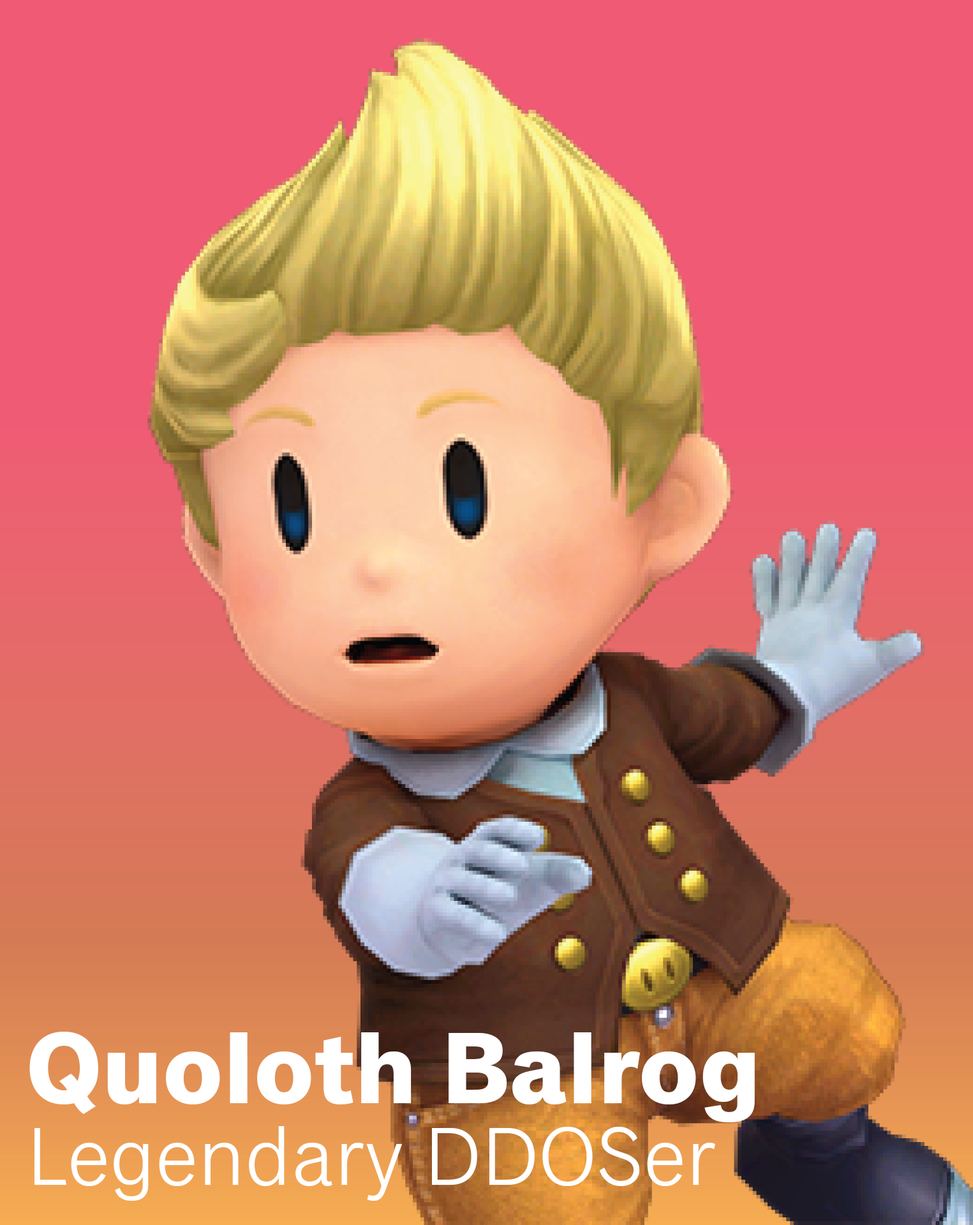
<style>
.page{position:relative;width:973px;height:1225px;background:#f05a74}
.page>*{position:absolute;margin:0}
.t1{font:102.1px "ClassicGrotesquePro-Bold";color:#ffffff}
.t2{font:83px "ClassicGrotesquePro-Book";color:#ffffff}
</style>
<div class="page">
<p class="t1" style="left:29px;top:1032px;width:726px;height:91px">Quoloth Balrog</p>
<p class="t2" style="left:34px;top:1126px;width:681px;height:75px">Legendary DDOSer</p>
</div>
